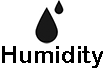
<style>
.page{position:relative;width:104px;height:69px;background:#ffffff}
.page>*{position:absolute;margin:0}
.t1{font:24.2px "ArialRoundedMTBold";color:#000000}
</style>
<div class="page">
<p class="t1" style="left:2px;top:46px;width:101px;height:22px">Humidity</p>
</div>
